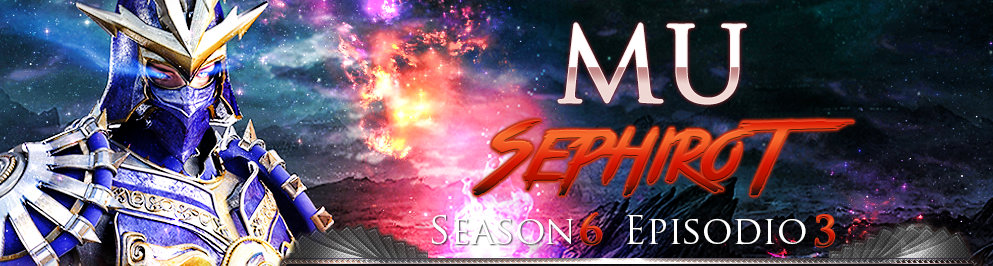
<style>
.page{position:relative;width:993px;height:266px}
.page>*{position:absolute;margin:0}
.t1{font:103px "TrajanPro-Regular";font-weight:bold}
.t2{font:72px "TrueLies";font-weight:bold}
.t3{font:38px "TrajanPro-Regular";color:#ffffff}
.t4{font:40px "TrajanPro-Regular";font-weight:bold}
</style>
<div class="page">
<p class="t1" style="left:557px;top:22px;width:190px;height:83px">MU</p>
<p class="t2" style="left:473px;top:120px;width:381px;height:76px">SephiroT</p>
<p class="t3" style="left:432px;top:214px;width:374px;height:31px">Season        Episodio</p>
<p class="t4" style="left:581px;top:213px;width:21px;height:32px">6</p>
<p class="t4" style="left:815px;top:215px;width:20px;height:32px">3</p>
</div>
